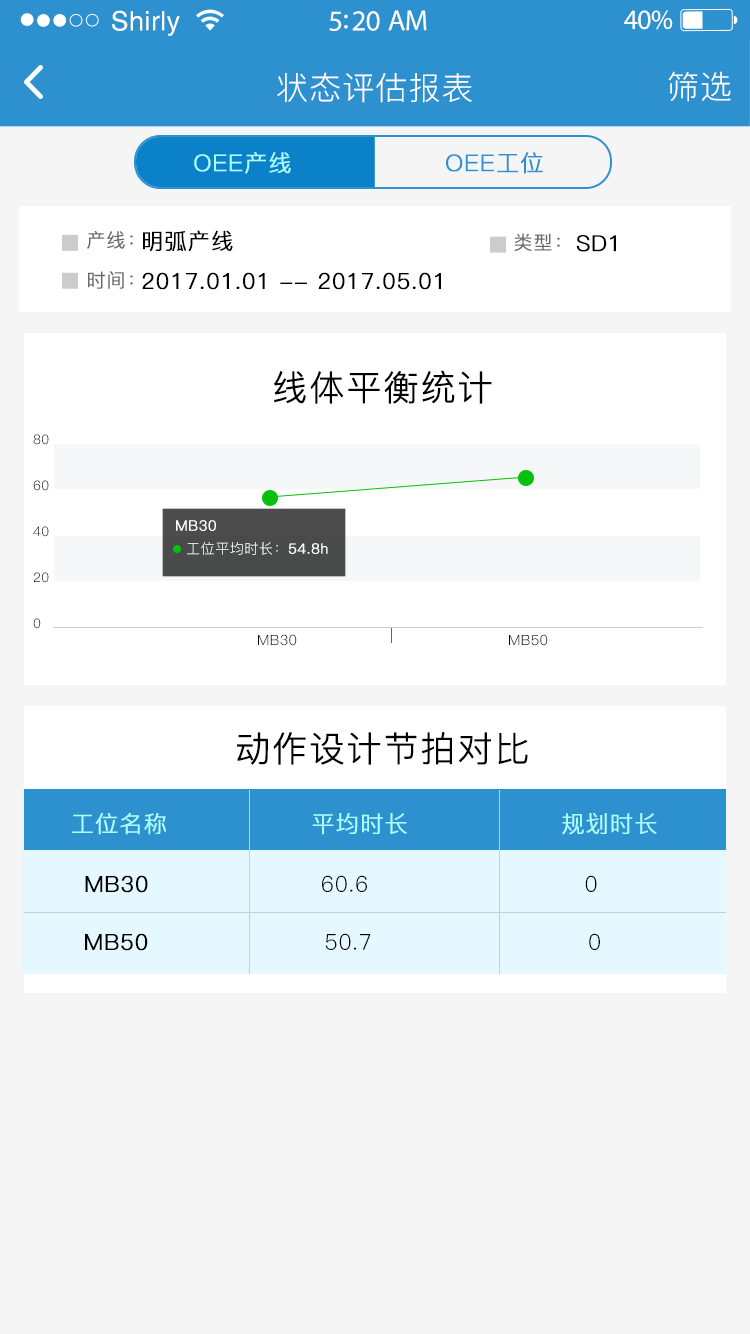
<style>
.page{position:relative;width:750px;height:1334px;background:#f5f5f5}
.page>*{position:absolute;margin:0}
.t1{font:26.8px "Helvetica";letter-spacing:0.02em;color:#ffffff}
.t2{font:29.1px "MyriadPro-Regular";letter-spacing:-0.02em;color:#ffffff}
.t3{font:27.9px "MyriadPro-Regular";letter-spacing:-0.02em;color:#ffffff}
.t4{font:32px "PingFang-SC-Regular";letter-spacing:0.03em;color:#ffffff}
.t5{font:19px/20px "PingFang-SC-Regular";letter-spacing:0.03em;color:#686767;font-weight:bold}
.t6{font:19px/20px "PingFang-SC-Regular";letter-spacing:0.03em;color:#686868;font-weight:bold}
.t7{font:22px/20px "PingFang-SC-Regular";letter-spacing:0.03em;color:#000000;font-weight:bold}
.t8{font:19px "PingFang-SC-Regular";letter-spacing:0.03em;color:#686868;font-weight:bold}
.t9{font:22px "PingFang-SC-Regular";letter-spacing:0.03em;color:#000000;font-weight:bold}
.t10{font:35px "PingFang-SC-Regular";letter-spacing:0.03em;color:#000000;font-weight:bold}
.t11{font:13.2px/23px "PingFang-SC-Regular";letter-spacing:0.03em;color:#000000}
.t12{font:14.2px "PingFang-SC-Regular";letter-spacing:0.03em;color:#ffffff;font-weight:bold}
.t13{font:14.2px "PingFang-SC-Regular";letter-spacing:0.03em;color:#ffffff}
.t14{font:14.2px "PingFang-SC-Regular";letter-spacing:0.03em;color:#000000}
.t15{font:23px "PingFang-SC-Regular";letter-spacing:0.03em;color:#abffff;font-weight:bold}
.t16{font:22px "PingFang-SC-Regular";letter-spacing:0.03em;color:#000000}
</style>
<div class="page">
<p class="t1" style="left:112px;top:10px;width:68px;height:26px">Shirly</p>
<p class="t2" style="left:329px;top:10px;width:98px;height:21px">5:20 AM</p>
<p class="t3" style="left:624px;top:10px;width:49px;height:20px">40%</p>
<p class="t4" style="left:277px;top:72px;width:195px;height:31px">状态评估报表</p>
<p class="t4" style="left:668px;top:71px;width:63px;height:31px">筛选</p>
<p class="t5" style="left:87px;top:231px;width:46px;height:58px;text-align:right">产线：<br><br><span class="t6">时间：</span></p>
<p class="t7" style="left:142px;top:230px;width:299px;height:60px">明弧产线<br><br>2017.01.01 -- 2017.05.01</p>
<p class="t8" style="left:514px;top:233px;width:46px;height:18px">类型：</p>
<p class="t9" style="left:576px;top:235px;width:40px;height:17px">SD1</p>
<p class="t10" style="left:274px;top:370px;width:218px;height:34px">线体平衡统计</p>
<p class="t11" style="left:33px;top:434px;width:16px;height:195px">80<br><br>60<br><br>40<br><br>20<br><br>0</p>
<p class="t12" style="left:176px;top:520px;width:40px;height:11px">MB30</p>
<p class="t13" style="left:187px;top:542px;width:141px;height:13px">工位平均时长：<span class="t12">54.8h</span></p>
<p class="t14" style="left:258px;top:634px;width:290px;height:12px">MB30                                         MB50</p>
<p class="t10" style="left:237px;top:732px;width:291px;height:33px">动作设计节拍对比</p>
<p class="t15" style="left:72px;top:813px;width:585px;height:22px">工位名称                平均时长                 规划时长</p>
<p class="t16" style="left:85px;top:875px;width:512px;height:18px"><span class="t9">MB30                    </span>60.6                           0</p>
<p class="t16" style="left:85px;top:933px;width:515px;height:18px"><span class="t9"> MB50</span>                      50.7                           0</p>
</div>
